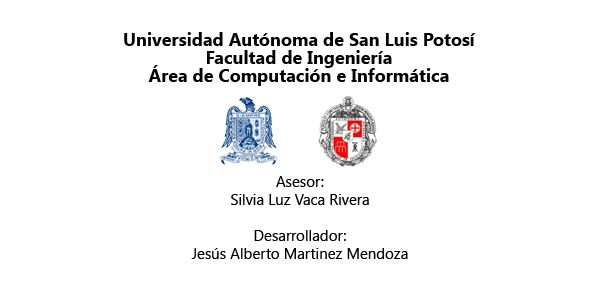
<style>
.page{position:relative;width:600px;height:300px;background:#ffffff}
.page>*{position:absolute;margin:0}
.t1{font:18px/18px "LaoUI-Bold";color:#000000}
.t2{font:15px/18px "LaoUI";color:#000000}
</style>
<div class="page">
<p class="t1" style="left:124px;top:32px;width:352px;height:54px;text-align:center">Universidad Autónoma de San Luis Potosí<br>Facultad de Ingeniería<br>Área de Computación e Informática</p>
<p class="t2" style="left:191px;top:176px;width:217px;height:83px;text-align:center">Asesor:<br>Silvia Luz Vaca Rivera<br><br>Desarrollador:<br>Jesús Alberto Martinez Mendoza</p>
</div>
